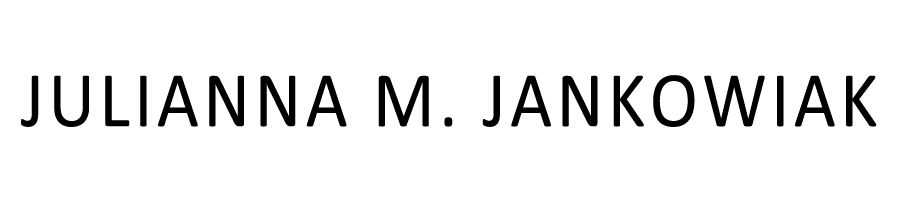
<style>
.page{position:relative;width:900px;height:198px;background:#ffffff}
.page>*{position:absolute;margin:0}
.t1{font:79.3px "Calibri";letter-spacing:0.06em;color:#000000;scale:0.92 1}
</style>
<div class="page">
<p class="t1" style="left:21px;top:75px;width:856px;height:52px">JULIANNA M. JANKOWIAK</p>
</div>
